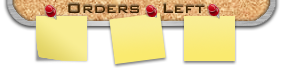
<style>
.page{position:relative;width:284px;height:69px;background:#ffffff}
.page>*{position:absolute;margin:0}
.t1{font:18px "BankGothicBT-Medium";color:#412604}
</style>
<div class="page">
<p class="t1" style="left:68px;top:3px;width:137px;height:10px">Orders   Left</p>
</div>
